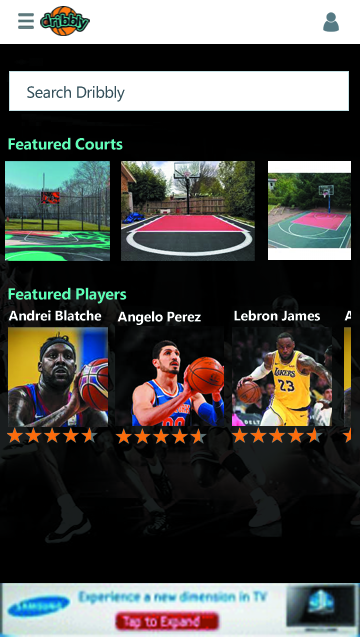
<style>
.page{position:relative;width:360px;height:637px;background:#000000}
.page>*{position:absolute;margin:0}
.t1{font:16px "SegoeUI";letter-spacing:-0.02em;color:#354f58}
.t2{font:16px "SegoeUI-Bold";letter-spacing:-0.02em;color:#5effb7}
.t3{font:16px "SegoeUI-Bold";letter-spacing:-0.02em;color:#59ffb5}
.t4{font:14px "SegoeUI-Bold";letter-spacing:-0.02em;color:#ffffff}
</style>
<div class="page">
<p class="t1" style="left:27px;top:86px;width:98px;height:16px">Search Dribbly</p>
<p class="t2" style="left:8px;top:137px;width:115px;height:13px">Featured Courts</p>
<p class="t3" style="left:8px;top:287px;width:119px;height:17px">Featured Players</p>
<p class="t4" style="left:8px;top:310px;width:94px;height:11px">Andrei Blatche</p>
<p class="t4" style="left:117px;top:311px;width:84px;height:14px">Angelo Perez</p>
<p class="t4" style="left:234px;top:310px;width:86px;height:11px">Lebron James</p>
</div>
